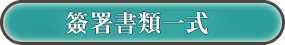
<style>
.page{position:relative;width:285px;height:45px}
.page>*{position:absolute;margin:0}
.t1{font:24px "RyuminPr6N-ExBold";color:#fff6f2}
</style>
<div class="page">
<p class="t1" style="left:65px;top:11px;width:143px;height:23px">簽署書類一式</p>
</div>
